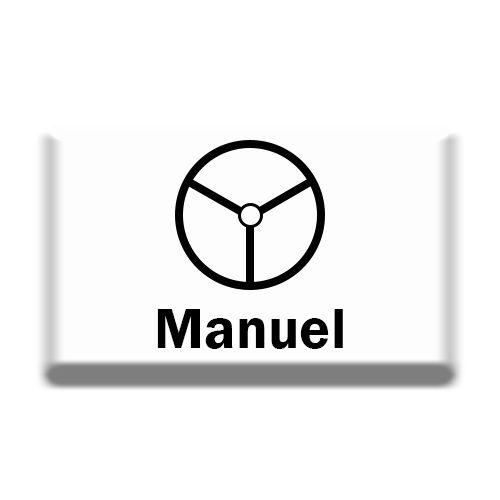
<style>
.page{position:relative;width:500px;height:500px;background:#ffffff}
.page>*{position:absolute;margin:0}
.t1{font:58.3px "FranklinGothic-Demi";color:#000000}
</style>
<div class="page">
<p class="t1" style="left:157px;top:309px;width:186px;height:40px">Manuel</p>
</div>
